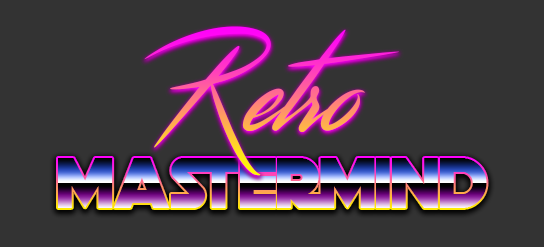
<style>
.page{position:relative;width:544px;height:247px;background:#333333}
.page>*{position:absolute;margin:0}
.t1{font:113.5px "Streamster"}
.t2{font:70px "DeathStar"}
</style>
<div class="page">
<p class="t1" style="left:144px;top:26px;width:256px;height:150px">Retro</p>
<p class="t2" style="left:58px;top:158px;width:429px;height:50px">MASTERMIND</p>
</div>
